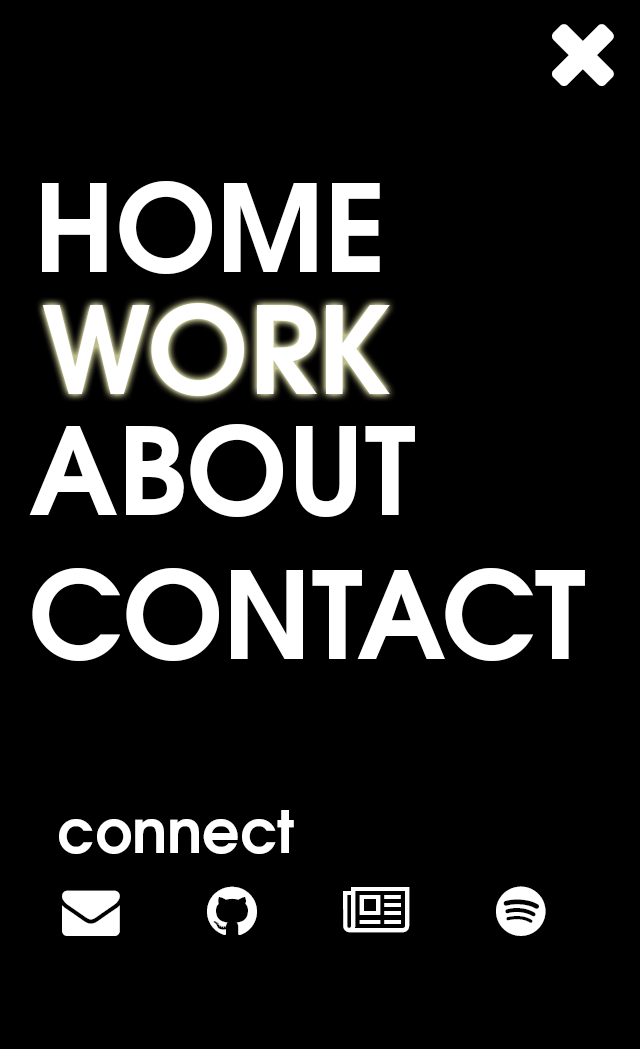
<style>
.page{position:relative;width:640px;height:1049px;background:#000000}
.page>*{position:absolute;margin:0}
.t1{font:120px "TeXGyreAdventor-Bold";color:#ffffff}
.t2{font:58.8px "TeXGyreAdventor-Bold";color:#ffffff}
</style>
<div class="page">
<p class="t1" style="left:42px;top:181px;width:338px;height:93px">HOME</p>
<p class="t1" style="left:42px;top:303px;width:348px;height:93px">WORK</p>
<p class="t1" style="left:29px;top:424px;width:556px;height:237px;text-align:justify">ABOUT<br>CONTACT</p>
<p class="t2" style="left:59px;top:810px;width:235px;height:44px">connect</p>
</div>
